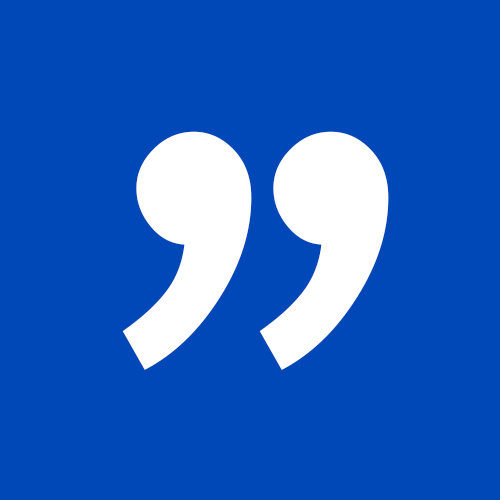
<style>
.page{position:relative;width:500px;height:500px;background:#0048b7}
.page>*{position:absolute;margin:0}
.t1{font:1043.8px "Catamaran-Regular";letter-spacing:0.073em;color:#ffffff}
</style>
<div class="page">
<p class="t1" style="left:122px;top:131px;width:130px;height:239px">’</p>
<p class="t1" style="left:259px;top:131px;width:130px;height:239px">’</p>
</div>
